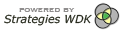
<style>
.page{position:relative;width:120px;height:32px;background:#ffffff}
.page>*{position:absolute;margin:0}
.t1{font:10.9px "Verdana-Italic";color:#26291c}
.t2{font:9.5px "Copperplate";color:#8f8d8d}
</style>
<div class="page">
<p class="t1" style="left:4px;top:14px;width:88px;height:12px">Strategies WDK</p>
<p class="t2" style="left:19px;top:8px;width:56px;height:4px">powered by</p>
</div>
